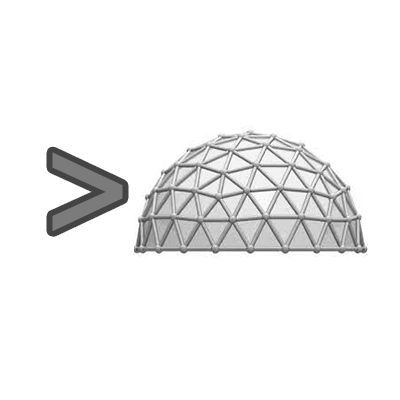
<style>
.page{position:relative;width:400px;height:400px;background:#ffffff}
.page>*{position:absolute;margin:0}
.t1{font:198.2px "MovistarHeadline";color:#7b7b7b;scale:1.08 1}
</style>
<div class="page">
<p class="t1" style="left:52px;top:152px;width:71px;height:79px">&gt;</p>
</div>
